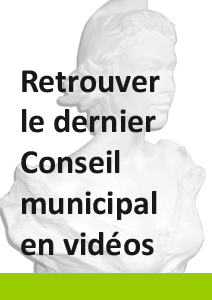
<style>
.page{position:relative;width:212px;height:300px;background:#ffffff}
.page>*{position:absolute;margin:0}
.t1{font:34px "Calibri-Bold";color:#1a171b}
</style>
<div class="page">
<p class="t1" style="left:21px;top:70px;width:139px;height:186px">Retrouver<br>le dernier<br>Conseil<br>municipal<br>en vidéos</p>
</div>
